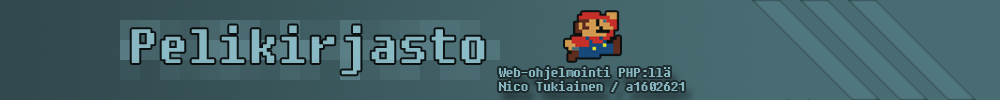
<style>
.page{position:relative;width:1000px;height:100px}
.page>*{position:absolute;margin:0}
.t1{font:48px "Fixedsys";color:#91c3ce}
.t2{font:12px "Fixedsys";color:#91c3ce}
</style>
<div class="page">
<p class="t1" style="left:131px;top:25px;width:354px;height:50px;opacity:0.85">Pelikirjasto</p>
<p class="t2" style="left:498px;top:67px;width:187px;height:25px;opacity:0.85">Web-ohjelmointi PHP:llä<br>Nico Tukiainen / a1602621</p>
</div>
